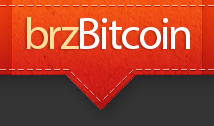
<style>
.page{position:relative;width:214px;height:126px;background:#333333}
.page>*{position:absolute;margin:0}
.t1{font:45px "MyriadPro-Regular";letter-spacing:-0.05em;color:#ffffff}
.t2{font:45px "MyriadPro-Regular";letter-spacing:-0.05em;color:#ffdd9a}
</style>
<div class="page">
<p class="t1" style="left:26px;top:17px;width:164px;height:32px"><span class="t2">brz</span>Bitcoin</p>
</div>
